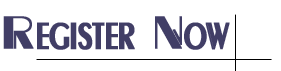
<style>
.page{position:relative;width:281px;height:71px;background:#ffffff}
.page>*{position:absolute;margin:0}
.t1{font:48px "BancoNormal";color:#413e66;font-weight:bold}
</style>
<div class="page">
<p class="t1" style="left:3px;top:16px;width:227px;height:34px">Register Now</p>
</div>
